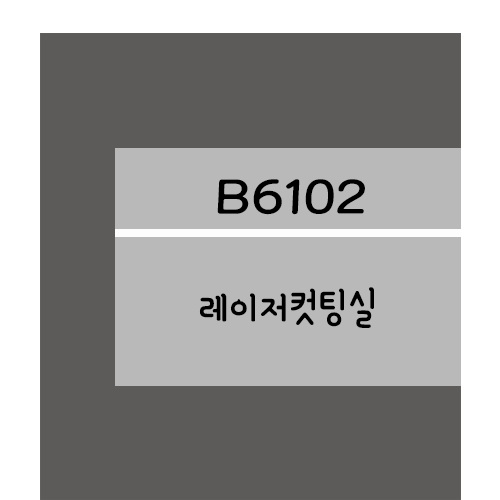
<style>
.page{position:relative;width:500px;height:500px;background:#5d5a5a}
.page>*{position:absolute;margin:0}
.t1{font:61.2px "YanoljaYacheR";color:#000000;scale:1.18 1}
.t2{font:48px "YanoljaYacheR";color:#000000}
</style>
<div class="page">
<p class="t1" style="left:217px;top:179px;width:148px;height:36px">B6102</p>
<p class="t2" style="left:199px;top:287px;width:175px;height:41px">레이저컷팅실</p>
</div>
